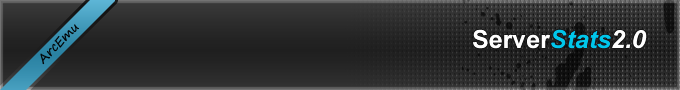
<style>
.page{position:relative;width:680px;height:90px}
.page>*{position:absolute;margin:0}
.t1{font:12.5px "SegoePrint";color:#000000}
.t2{font:25px "Arial-BoldMT";color:#ffffff}
.t3{font:25px "Arial-BoldItalicMT";color:#00b9e2}
.t4{font:25px "Arial-BoldItalicMT";color:#ffffff}
</style>
<div class="page">
<p class="t1" style="left:40px;top:24px;width:39px;height:41px;rotate:-45deg">ArcEmu</p>
<p class="t2" style="left:473px;top:29px;width:174px;height:20px">Server<span class="t3">Stats</span><span class="t4">2.0</span></p>
</div>
